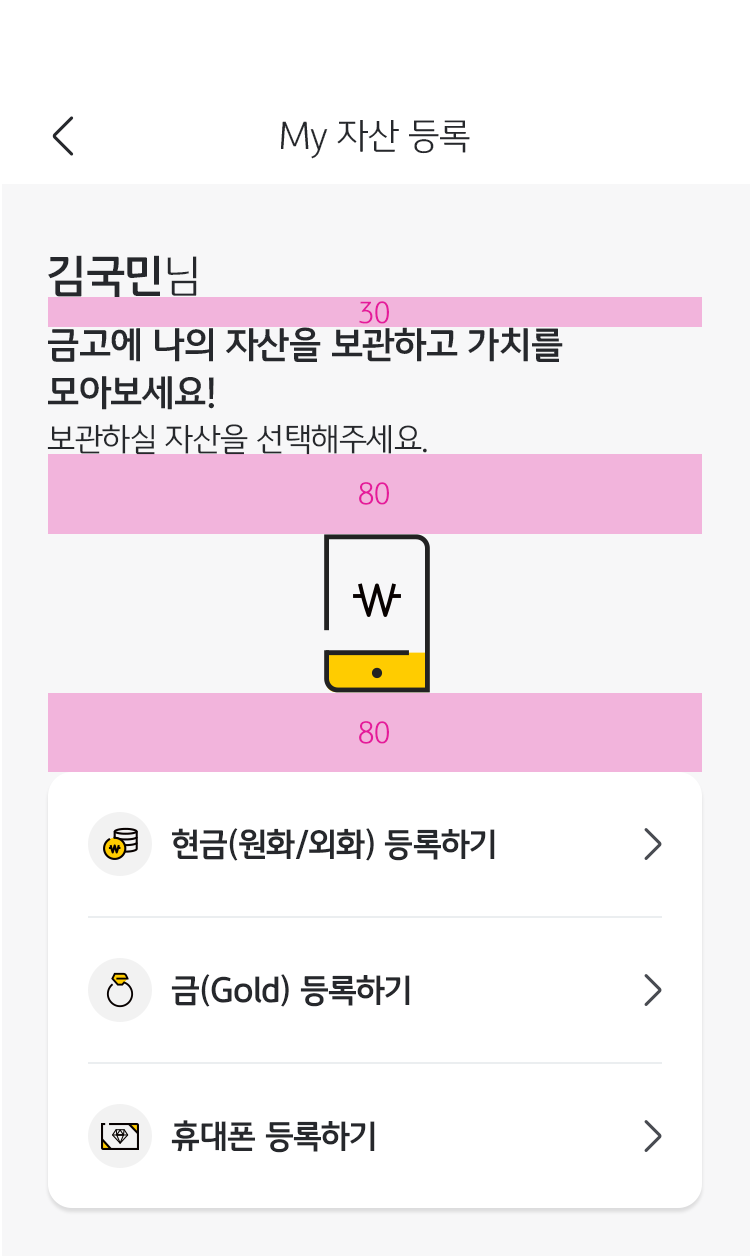
<style>
.page{position:relative;width:750px;height:1256px;background:#ffffff}
.page>*{position:absolute;margin:0}
.t1{font:36px "KBFGText-Light";letter-spacing:-0.02em;color:#26282c}
.t2{font:44px "KBFGText-Bold";letter-spacing:-0.02em;color:#26282c}
.t3{font:44px "KBFGText-Light";letter-spacing:-0.02em;color:#26282c}
.t4{font:28px "KBFGText-Light";letter-spacing:-0.02em;color:#e51a9b}
.t5{font:36px/48px "KBFGText-Bold";letter-spacing:-0.02em;color:#26282c}
.t6{font:32px/66px "KBFGText-Light";letter-spacing:-0.02em;color:#26282c}
.t7{font:32px "KBFGText-Bold";letter-spacing:-0.02em;color:#26282c}
</style>
<div class="page">
<p class="t1" style="left:281px;top:120px;width:189px;height:39px">My 자산 등록</p>
<p class="t2" style="left:48px;top:255px;width:149px;height:42px">김국민<span class="t3">님</span></p>
<p class="t4" style="left:359px;top:301px;width:30px;height:23px">30</p>
<p class="t5" style="left:47px;top:327px;width:516px;height:128px">금고에 나의 자산을 보관하고 가치를<br>모아보세요!<br><span class="t6">보관하실 자산을 선택해주세요.</span></p>
<p class="t4" style="left:359px;top:482px;width:30px;height:23px">80</p>
<p class="t4" style="left:359px;top:721px;width:30px;height:23px">80</p>
<p class="t7" style="left:172px;top:828px;width:323px;height:33px">현금(원화/외화) 등록하기</p>
<p class="t7" style="left:171px;top:974px;width:239px;height:33px">금(Gold) 등록하기</p>
<p class="t7" style="left:171px;top:1120px;width:204px;height:33px">휴대폰 등록하기</p>
</div>
